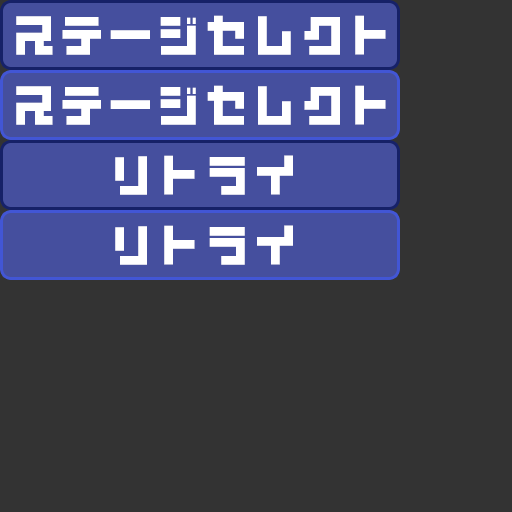
<style>
.page{position:relative;width:512px;height:512px;background:#333333}
.page>*{position:absolute;margin:0}
.t1{font:48px "ABDON-Bold";color:#ffffff}
</style>
<div class="page">
<p class="t1" style="left:16px;top:15px;width:370px;height:40px">ステージセレクト</p>
<p class="t1" style="left:16px;top:85px;width:370px;height:40px">ステージセレクト</p>
<p class="t1" style="left:115px;top:155px;width:178px;height:40px">リトライ</p>
<p class="t1" style="left:115px;top:225px;width:178px;height:40px">リトライ</p>
</div>
